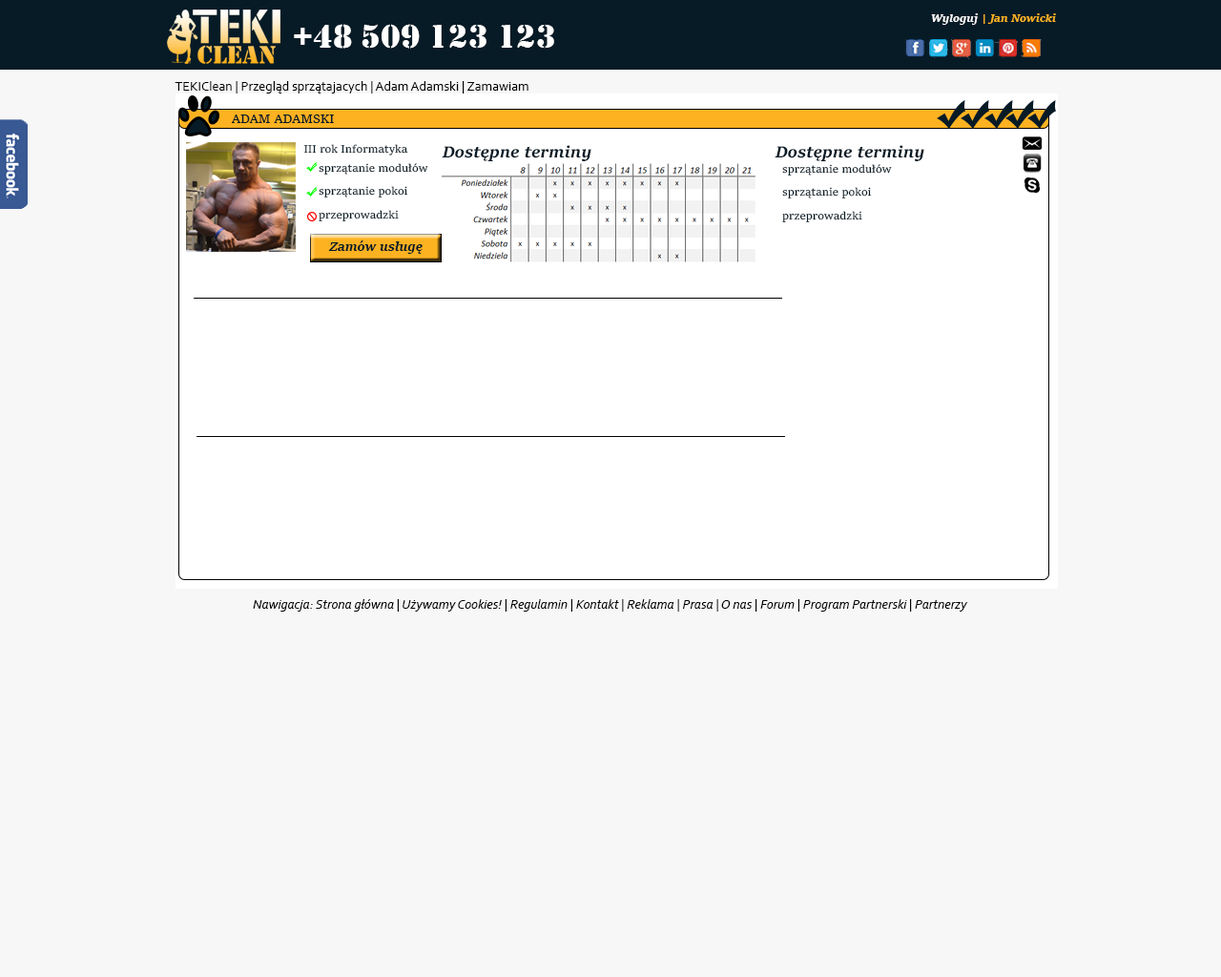
<style>
.page{position:relative;width:1221px;height:977px;background:#f7f7f7}
.page>*{position:absolute;margin:0}
.t1{font:11.4px "SitkaText-BoldItalic";color:#fcb324}
.t2{font:11.4px "SitkaText-BoldItalic";color:#ffffff}
.t3{font:34.3px "Stencil";color:#ffffff}
.t4{font:13.4px "Corbel";color:#010000}
.t5{font:13.4px "SitkaText";color:#071b26}
.t6{font:11.4px "SitkaText";color:#071b26}
.t7{font:17.2px "SitkaText-BoldItalic";color:#071b26}
.t8{font:11.4px/23.7px "SitkaText";color:#071b26}
.t9{font:13.4px "SitkaText-BoldItalic";color:#071b26}
.t10{font:13.4px "Corbel-Italic";color:#010101}
</style>
<div class="page">
<p class="t1" style="left:931px;top:13px;width:125px;height:12px"><span class="t2">Wyloguj </span>| Jan Nowicki</p>
<p class="t3" style="left:294px;top:24px;width:260px;height:25px">+48 509 123 123</p>
<p class="t4" style="left:175px;top:81px;width:353px;height:12px">TEKIClean | Przegląd sprzątajacych | Adam Adamski | Zamawiam</p>
<p class="t5" style="left:231px;top:114px;width:103px;height:9px">ADAM ADAMSKI</p>
<p class="t6" style="left:303px;top:144px;width:105px;height:11px">III rok Informatyka</p>
<p class="t7" style="left:442px;top:145px;width:149px;height:16px">Dostępne terminy</p>
<p class="t7" style="left:774px;top:145px;width:150px;height:16px">Dostępne terminy</p>
<p class="t8" style="left:319px;top:163px;width:109px;height:58px">sprzątanie modułów<br>sprzątanie pokoi<br>przeprowadzki</p>
<p class="t8" style="left:782px;top:164px;width:110px;height:58px">sprzątanie modułów<br>sprzątanie pokoi<br>przeprowadzki</p>
<p class="t9" style="left:328px;top:240px;width:95px;height:14px">Zamów usługę</p>
<p class="t10" style="left:253px;top:599px;width:715px;height:12px">Nawigacja: Strona główna | Używamy Cookies! | Regulamin | Kontakt | Reklama | Prasa | O nas | Forum | Program Partnerski | Partnerzy</p>
</div>
